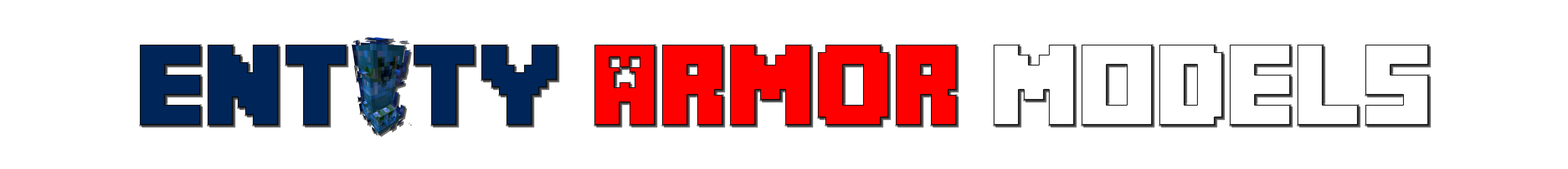
<style>
.page{position:relative;width:1568px;height:169px;background:#ffffff}
.page>*{position:absolute;margin:0}
.t1{font:80.4px "MineCrafter-3";color:#002659}
.t2{font:80.4px "MineCrafter-3";color:#ff0000}
.t3{font:80.4px "MineCrafter-3";color:#ffffff}
</style>
<div class="page">
<p class="t1" style="left:140px;top:45px;width:1288px;height:80px">Ent  ty <span class="t2">Armor </span><span class="t3">MOdels</span></p>
</div>
